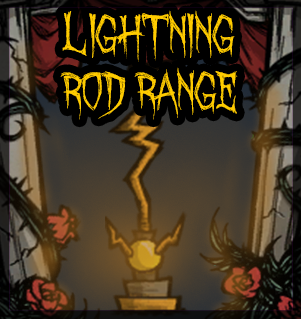
<style>
.page{position:relative;width:301px;height:319px}
.page>*{position:absolute;margin:0}
.t1{font:47.2px "OctoberCrow";color:#ffcc00}
</style>
<div class="page">
<p class="t1" style="left:60px;top:10px;width:178px;height:110px">Lightning<br>Rod Range</p>
</div>
